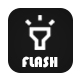
<style>
.page{position:relative;width:80px;height:80px;background:#ffffff}
.page>*{position:absolute;margin:0}
.t1{font:15px "Bauhaus93";color:#ffffff}
</style>
<div class="page">
<p class="t1" style="left:22px;top:56px;width:36px;height:12px">FLASH</p>
</div>
